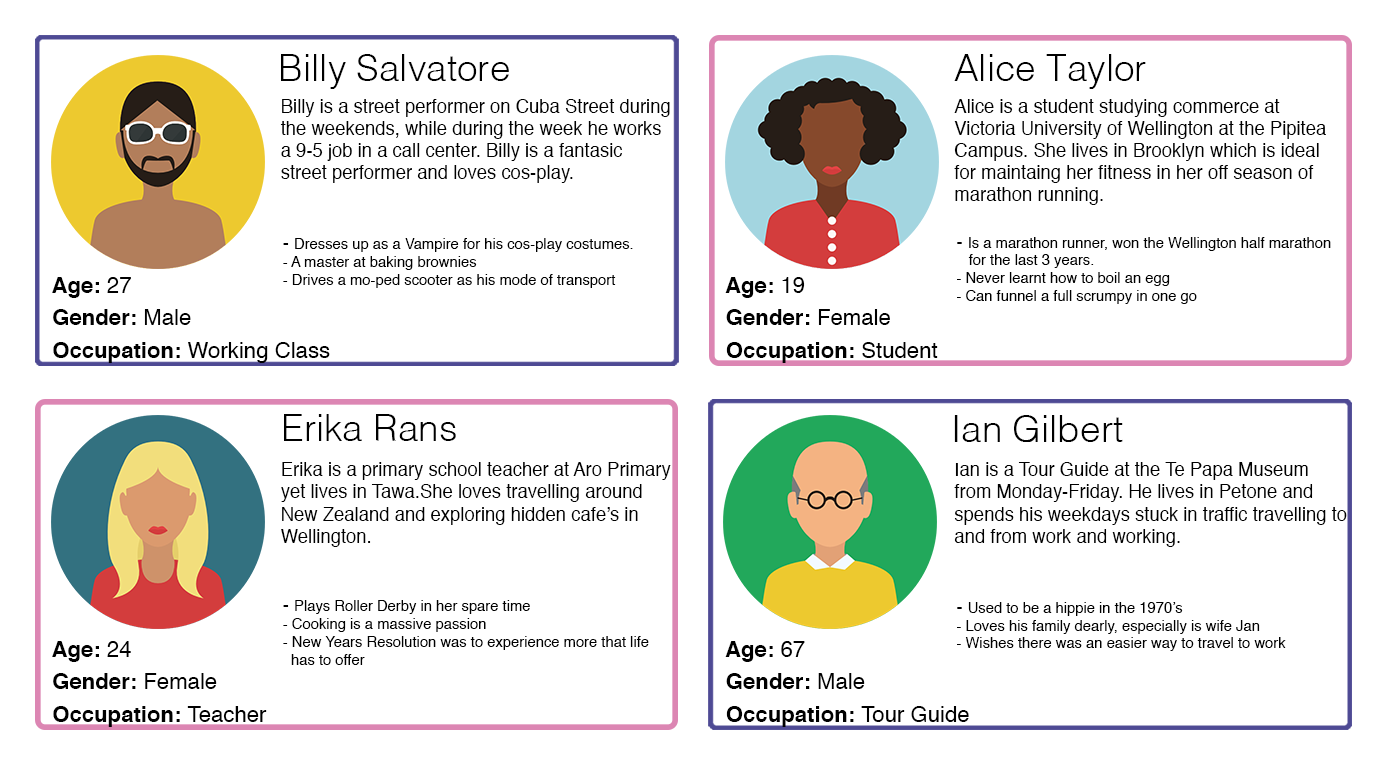
<style>
.page{position:relative;width:1395px;height:765px;background:#ffffff}
.page>*{position:absolute;margin:0}
.t1{font:36.9px "Helvetica-Light";color:#000000}
.t2{font:18.4px "Helvetica";color:#000000}
.t3{font:14.8px "Helvetica";color:#000000}
.t4{font:22.1px "Helvetica-Bold";color:#000000}
.t5{font:22.1px "Helvetica";color:#000000}
</style>
<div class="page">
<p class="t1" style="left:281px;top:54px;width:228px;height:35px">Billy Salvatore</p>
<p class="t1" style="left:954px;top:54px;width:192px;height:35px">Alice Taylor</p>
<p class="t2" style="left:280px;top:99px;width:390px;height:84px">Billy is a street performer on Cuba Street during<br>the weekends, while during the week he works<br>a 9-5 job in a call center. Billy is a fantasic<br>street performer and loves cos-play.</p>
<p class="t2" style="left:954px;top:99px;width:372px;height:106px">Alice is a student studying commerce at<br>Victoria University of Wellington at the Pipitea<br>Campus. She lives in Brooklyn which is ideal<br>for maintaing her fitness in her off season of<br>marathon running.</p>
<p class="t3" style="left:283px;top:238px;width:350px;height:50px"><span class="t2">- </span>Dresses up as a Vampire for his cos-play costumes.<br>- A master at baking brownies<br>- Drives a mo-ped scooter as his mode of transport</p>
<p class="t3" style="left:957px;top:237px;width:374px;height:67px"><span class="t2">- </span>Is a marathon runner, won the Wellington half marathon<br>   for the last 3 years.<br>- Never learnt how to boil an egg<br>- Can funnel a full scrumpy in one go</p>
<p class="t4" style="left:52px;top:277px;width:79px;height:21px">Age: <span class="t5">27</span></p>
<p class="t4" style="left:725px;top:277px;width:80px;height:21px">Age: <span class="t5">19</span></p>
<p class="t4" style="left:53px;top:309px;width:138px;height:16px">Gender: <span class="t5">Male</span></p>
<p class="t4" style="left:726px;top:309px;width:164px;height:16px">Gender: <span class="t5">Female</span></p>
<p class="t5" style="left:53px;top:342px;width:277px;height:21px"><span class="t4">Occupation: </span>Working Class</p>
<p class="t4" style="left:726px;top:342px;width:212px;height:21px">Occupation: <span class="t5">Student</span></p>
<p class="t1" style="left:284px;top:414px;width:172px;height:27px">Erika Rans</p>
<p class="t1" style="left:954px;top:415px;width:169px;height:27px">Ian Gilbert</p>
<p class="t2" style="left:281px;top:462px;width:390px;height:85px">Erika is a primary school teacher at Aro Primary <br>yet lives in Tawa.She loves travelling around <br>New Zealand and exploring hidden cafe’s in <br>Wellington.</p>
<p class="t2" style="left:954px;top:462px;width:393px;height:85px">Ian is a Tour Guide at the Te Papa Museum <br>from Monday-Friday. He lives in Petone and <br>spends his weekdays stuck in traffic travelling to<br>and from work and working.</p>
<p class="t3" style="left:283px;top:600px;width:366px;height:65px"><span class="t2">- </span>Plays Roller Derby in her spare time<br>- Cooking is a massive passion<br>- New Years Resolution was to experience more that life<br>  has to offer</p>
<p class="t3" style="left:957px;top:602px;width:329px;height:49px"><span class="t2">- </span>Used to be a hippie in the 1970’s<br>- Loves his family dearly, especially is wife Jan<br>- Wishes there was an easier way to travel to work</p>
<p class="t4" style="left:52px;top:641px;width:79px;height:21px">Age: <span class="t5">24</span></p>
<p class="t4" style="left:725px;top:641px;width:80px;height:21px">Age: <span class="t5">67</span></p>
<p class="t4" style="left:53px;top:673px;width:164px;height:16px">Gender: <span class="t5">Female</span></p>
<p class="t4" style="left:726px;top:673px;width:139px;height:16px">Gender: <span class="t5">Male</span></p>
<p class="t4" style="left:53px;top:706px;width:214px;height:21px">Occupation: <span class="t5">Teacher</span></p>
<p class="t4" style="left:726px;top:706px;width:243px;height:21px">Occupation: <span class="t5">Tour Guide</span></p>
</div>
